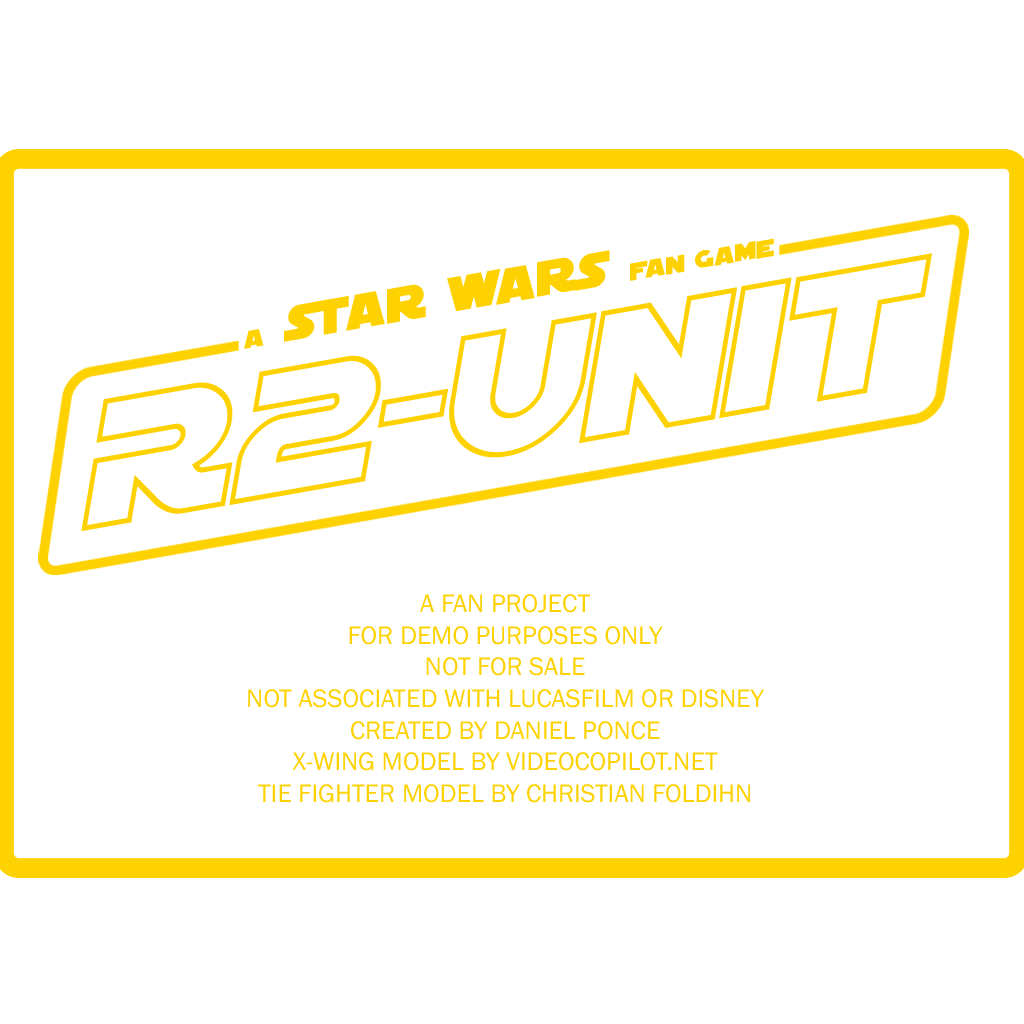
<style>
.page{position:relative;width:1024px;height:1024px;background:#ffffff}
.page>*{position:absolute;margin:0}
.t1{font:51.9px "SFDistantGalaxy";color:#fed100}
.t2{font:25.9px "SFDistantGalaxy";color:#fed100}
.t3{font:187.2px "SFDistantGalaxyOutlineItalic";color:#fed100}
.t4{font:26.3px/31.6px "FranklinGothic-Book";color:#fed100}
</style>
<div class="page">
<p class="t1" style="left:244px;top:238px;width:530px;height:111px;rotate:-10deg"><span class="t2">A</span> Star wars <span class="t2">Fan Game</span></p>
<p class="t3" style="left:81px;top:253px;width:851px;height:278px;rotate:-10deg">R2-Unit</p>
<p class="t4" style="left:248px;top:594px;width:516px;height:209px;text-align:center">A FAN PROJECT<br>FOR DEMO PURPOSES ONLY<br>NOT FOR SALE<br>NOT ASSOCIATED WITH LUCASFILM OR DISNEY<br>CREATED BY DANIEL PONCE<br>X-WING MODEL BY VIDEOCOPILOT.NET<br>TIE FIGHTER MODEL BY CHRISTIAN FOLDIHN</p>
</div>
